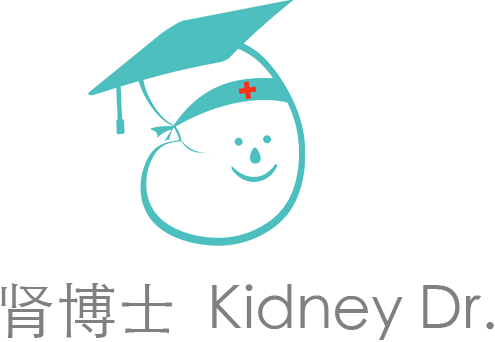
<style>
.page{position:relative;width:495px;height:342px;background:#ffffff}
.page>*{position:absolute;margin:0}
.t1{font:60px "STHeitiSC-Light";color:#808080}
</style>
<div class="page">
<p class="t1" style="left:1px;top:283px;width:493px;height:57px">肾博士  Kidney Dr.</p>
</div>
